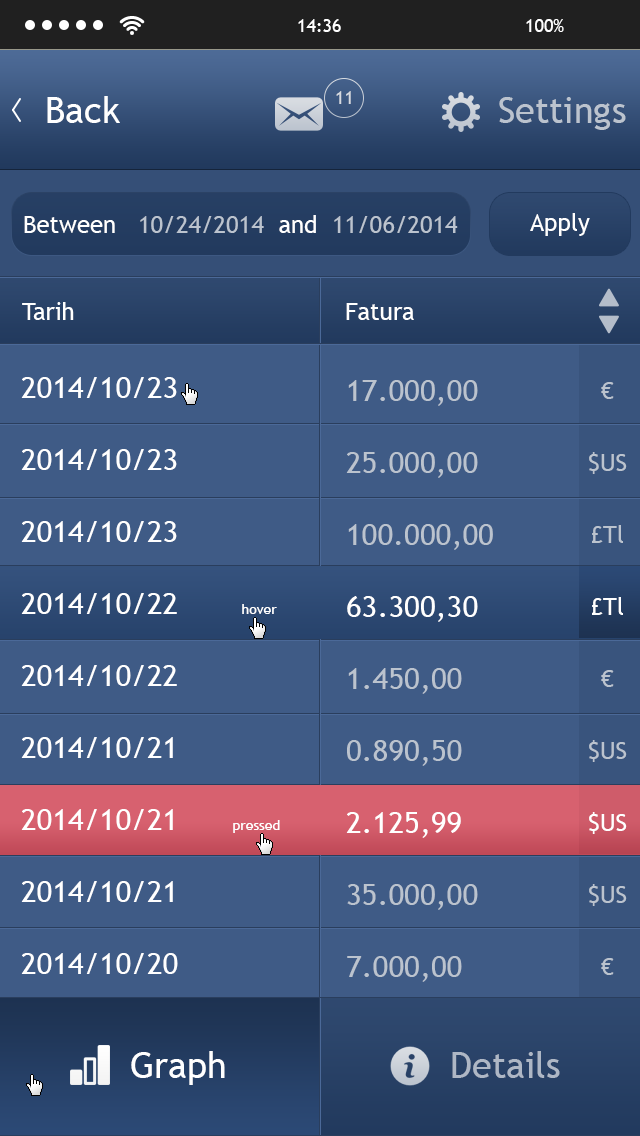
<style>
.page{position:relative;width:640px;height:1136px;background:#3f5b86}
.page>*{position:absolute;margin:0}
.t1{font:36px "TrebuchetMS";color:#ffffff}
.t2{font:18px "TrebuchetMS";color:#d6dae0}
.t3{font:36px "TrebuchetMS";color:#bbc3ce}
.t4{font:24px "TrebuchetMS";color:#bbc3ce}
.t5{font:24px "TrebuchetMS";color:#ffffff}
.t6{font:30px/72px "TrebuchetMS";color:#ffffff}
.t7{font:14px/72px "TrebuchetMS";color:#ffffff}
.t8{font:30px/72px "TrebuchetMS";color:#bbc3ce}
.t9{font:24px/72px "TrebuchetMS";color:#bbc3ce}
.t10{font:24px/72px "TrebuchetMS";color:#ffffff}
.t11{font:36px "TrebuchetMS";color:#aeb7c5}
</style>
<div class="page">
<p class="t1" style="left:47px;top:96px;width:73px;height:27px">Back</p>
<p class="t2" style="left:336px;top:91px;width:15px;height:13px">11</p>
<p class="t3" style="left:499px;top:97px;width:127px;height:33px">Settings</p>
<p class="t4" style="left:24px;top:215px;width:434px;height:18px"><span class="t5">Between   </span>10/24/2014<span class="t5">  and  </span>11/06/2014</p>
<p class="t5" style="left:530px;top:213px;width:60px;height:23px">Apply</p>
<p class="t5" style="left:22px;top:302px;width:52px;height:18px">Tarih</p>
<p class="t5" style="left:346px;top:303px;width:68px;height:17px">Fatura</p>
<p class="t6" style="left:21px;top:377px;width:259px;height:741px">2014/10/23<br>2014/10/23<br>2014/10/23<br>2014/10/22       <span class="t7">hover<br></span>2014/10/22<br>2014/10/21<br>2014/10/21      <span class="t7">pressed<br></span>2014/10/21<br>2014/10/20<br>Huseyin Celik<br>Ahmet Yildirim</p>
<p class="t8" style="left:346px;top:380px;width:147px;height:746px">17.000,00<br>25.000,00<br>100.000,00<br><span class="t6">63.300,30<br></span>1.450,00<br>0.890,50<br><span class="t6">2.125,99<br></span>35.000,00<br>7.000,00<br>1.900,00<br>234.000,40</p>
<p class="t9" style="left:589px;top:382px;width:38px;height:737px;text-align:center">€<br>$US<br>£Tl<br><span class="t10">£Tl<br></span>€<br>$US<br><span class="t10">$US<br></span>$US<br>€<br>£Tl<br>£Tl</p>
<p class="t1" style="left:131px;top:1051px;width:94px;height:34px">Graph</p>
<p class="t11" style="left:452px;top:1051px;width:108px;height:27px">Details</p>
</div>
